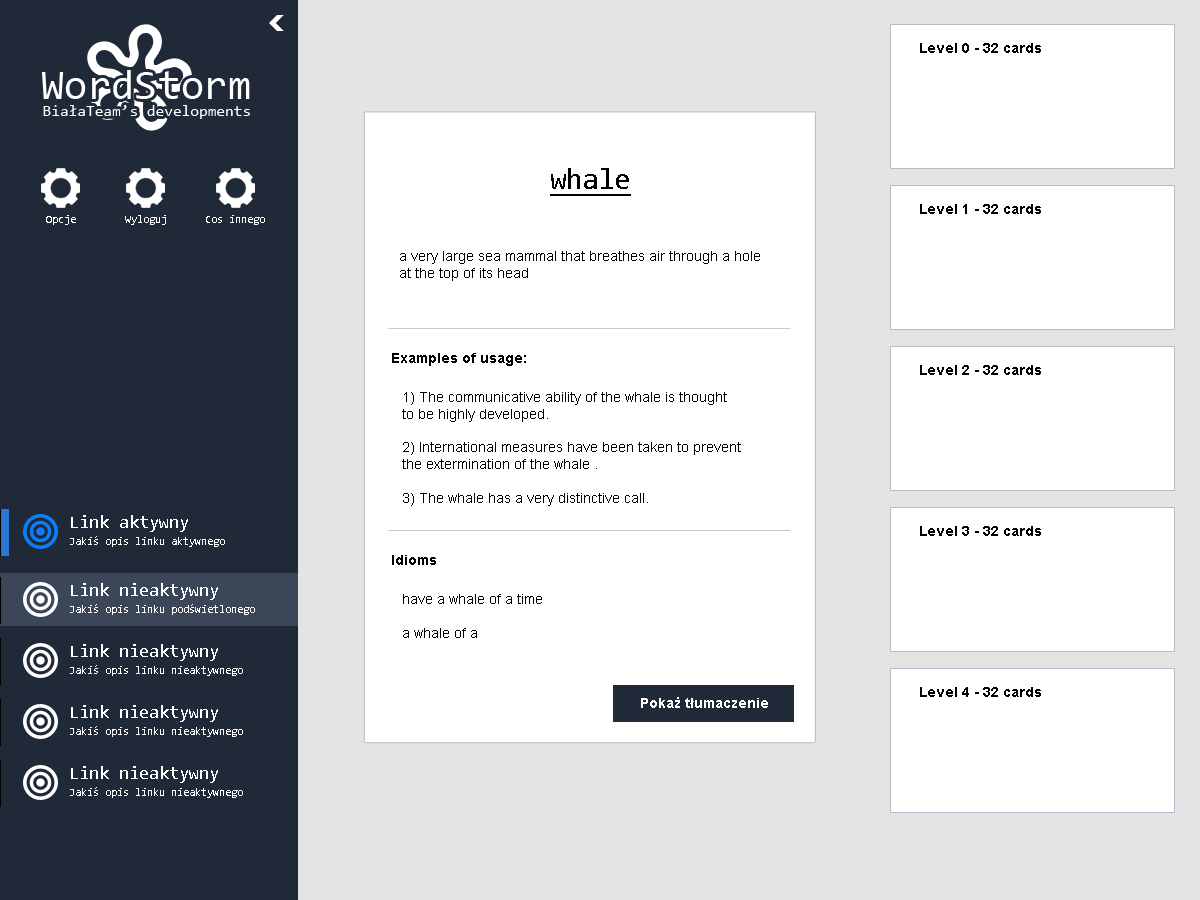
<style>
.page{position:relative;width:1200px;height:900px;background:#ffffff}
.page>*{position:absolute;margin:0}
.t1{font:14px "Arial-BoldMT";color:#000000}
.t2{font:42.5px "Consolas";color:#ffffff}
.t3{font:15.8px "Consolas";color:#ffffff}
.t4{font:30px "Consolas";color:#000000;text-decoration:underline}
.t5{font:11px "Consolas";color:#fefefe}
.t6{font:14px "ArialMT";color:#000000}
.t7{font:18px "Consolas";color:#ffffff}
.t8{font:14px "Arial-BoldMT";color:#ffffff}
</style>
<div class="page">
<p class="t1" style="left:920px;top:43px;width:121px;height:10px">Level 0 - 32 cards</p>
<p class="t2" style="left:42px;top:70px;width:208px;height:29px">WordStorm</p>
<p class="t3" style="left:43px;top:105px;width:207px;height:14px">BiałaTeam’s developments</p>
<p class="t4" style="left:550px;top:168px;width:81px;height:28px">whale</p>
<p class="t1" style="left:920px;top:204px;width:121px;height:10px">Level 1 - 32 cards</p>
<p class="t5" style="left:46px;top:215px;width:30px;height:10px">Opcje</p>
<p class="t5" style="left:125px;top:215px;width:41px;height:10px">Wyloguj</p>
<p class="t5" style="left:206px;top:215px;width:59px;height:10px">Cos innego</p>
<p class="t6" style="left:400px;top:251px;width:360px;height:30px">a very ​large ​sea ​mammal that ​breathes ​air through a ​hole <br>at the ​top of ​its ​head</p>
<p class="t1" style="left:392px;top:353px;width:134px;height:13px">Examples of usage:</p>
<p class="t1" style="left:920px;top:365px;width:121px;height:10px">Level 2 - 32 cards</p>
<p class="t6" style="left:402px;top:392px;width:339px;height:114px">1) The ​communicative ​ability of the whale is ​thought <br>to be ​highly ​developed.<br><br>2) International ​measures have been taken to ​prevent <br>the ​extermination of the whale .<br><br>3) The whale has a very ​distinctive ​call.</p>
<p class="t7" style="left:71px;top:515px;width:117px;height:17px">Link aktywny</p>
<p class="t1" style="left:920px;top:526px;width:121px;height:10px">Level 3 - 32 cards</p>
<p class="t5" style="left:70px;top:536px;width:155px;height:11px">Jakiś opis linku aktywnego</p>
<p class="t1" style="left:392px;top:555px;width:44px;height:10px">Idioms</p>
<p class="t7" style="left:71px;top:583px;width:147px;height:17px">Link nieaktywny</p>
<p class="t5" style="left:70px;top:604px;width:185px;height:11px">Jakiś opis linku podświetlonego</p>
<p class="t6" style="left:403px;top:594px;width:139px;height:44px">have a whale of a time<br><br>a whale of a</p>
<p class="t7" style="left:71px;top:644px;width:147px;height:17px">Link nieaktywny</p>
<p class="t5" style="left:70px;top:665px;width:173px;height:11px">Jakiś opis linku nieaktywnego</p>
<p class="t1" style="left:920px;top:687px;width:121px;height:10px">Level 4 - 32 cards</p>
<p class="t8" style="left:641px;top:697px;width:127px;height:11px">Pokaż tłumaczenie</p>
<p class="t7" style="left:71px;top:705px;width:147px;height:17px">Link nieaktywny</p>
<p class="t5" style="left:70px;top:726px;width:173px;height:11px">Jakiś opis linku nieaktywnego</p>
<p class="t7" style="left:71px;top:766px;width:147px;height:17px">Link nieaktywny</p>
<p class="t5" style="left:70px;top:787px;width:173px;height:11px">Jakiś opis linku nieaktywnego</p>
</div>
